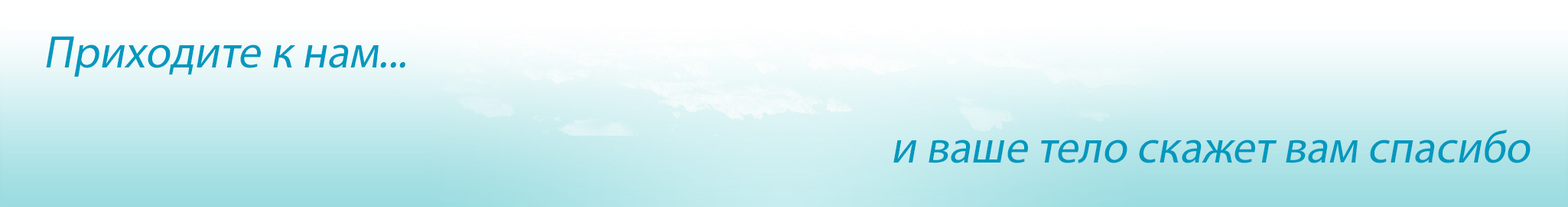
<style>
.page{position:relative;width:1568px;height:207px}
.page>*{position:absolute;margin:0}
.t1{font:45.9px "MyriadPro-Regular";color:#0098be;font-style:italic}
</style>
<div class="page">
<p class="t1" style="left:46px;top:36px;width:359px;height:40px">Приходите к нам...</p>
<p class="t1" style="left:893px;top:129px;width:638px;height:34px">и ваше тело скажет вам спасибо</p>
</div>
